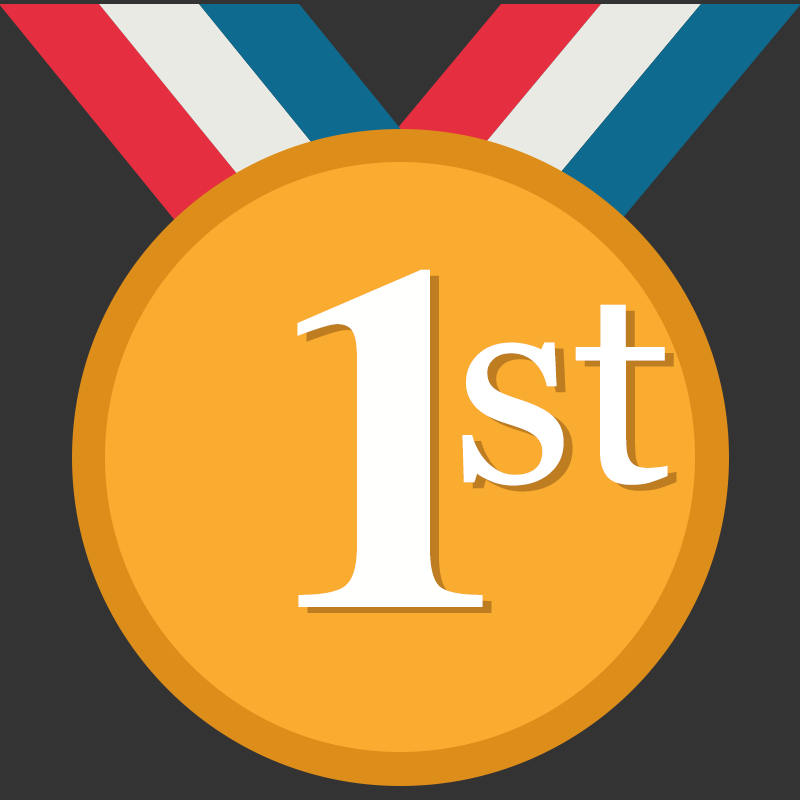
<style>
.page{position:relative;width:800px;height:800px;background:#f9ac30}
.page>*{position:absolute;margin:0}
.t1{font:490px "Times-Bold";color:#fffffe}
.t2{font:280.9px "Georgia";color:#ffffff}
</style>
<div class="page">
<p class="t1" style="left:297px;top:269px;width:186px;height:338px">1</p>
<p class="t2" style="left:462px;top:304px;width:206px;height:182px">st</p>
</div>
